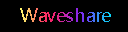
<style>
.page{position:relative;width:128px;height:32px;background:#000000}
.page>*{position:absolute;margin:0}
.t1{font:18px "MicrosoftYaHeiUI"}
</style>
<div class="page">
<p class="t1" style="left:20px;top:8px;width:91px;height:14px">Waveshare</p>
</div>
